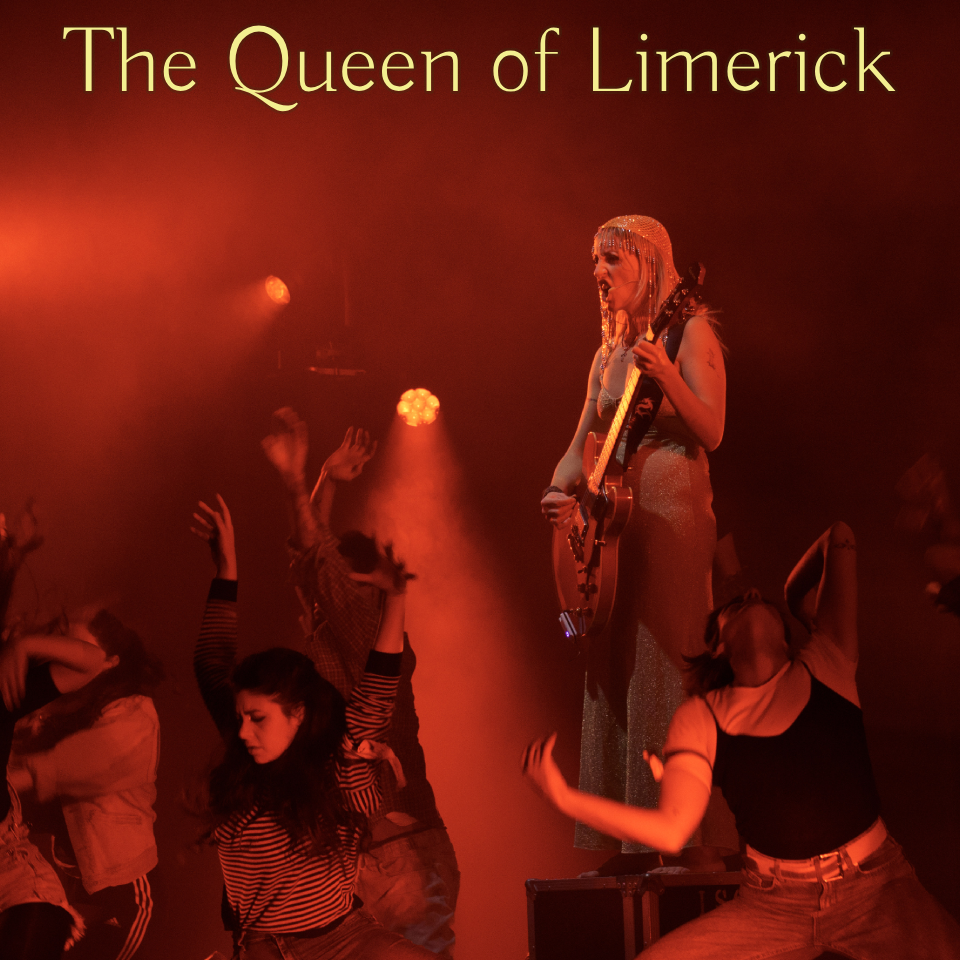
<style>
.page{position:relative;width:960px;height:960px}
.page>*{position:absolute;margin:0}
.t1{font:93px "Buda-Light";color:#f3ef90}
</style>
<div class="page">
<p class="t1" style="left:63px;top:25px;width:833px;height:87px">The Queen of Limerick</p>
</div>
